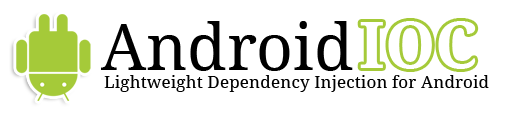
<style>
.page{position:relative;width:505px;height:114px;background:#ffffff}
.page>*{position:absolute;margin:0}
.t1{font:64px "DroidSerif";color:#000000}
.t2{font:64px "DroidSerif-Bold";color:#ffffff}
.t3{font:17.3px "DroidSerif";color:#000000}
</style>
<div class="page">
<p class="t1" style="left:101px;top:21px;width:252px;height:50px">Android</p>
<p class="t2" style="left:360px;top:21px;width:116px;height:48px">IOC</p>
<p class="t3" style="left:104px;top:75px;width:385px;height:17px">Lightweight Dependency Injection for Android</p>
</div>
